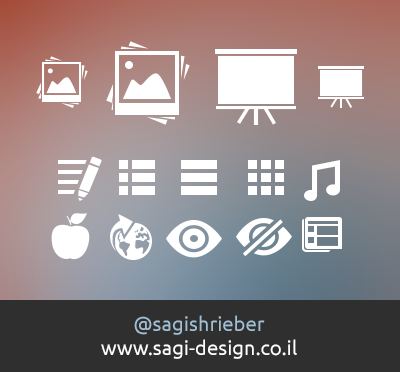
<style>
.page{position:relative;width:400px;height:372px}
.page>*{position:absolute;margin:0}
.t1{font:20px "Ubuntu-Regular";color:#ffffff}
.t2{font:20px "Ubuntu-Regular";color:#a1bed3}
</style>
<div class="page">
<p class="t1" style="left:101px;top:315px;width:196px;height:44px;text-align:center"><span class="t2">@sagishrieber<br></span>www.sagi-design.co.il</p>
</div>
